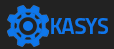
<style>
.page{position:relative;width:114px;height:49px;background:#222222}
.page>*{position:absolute;margin:0}
.t1{font:22.7px "TitilliumMaps29L-800wt";letter-spacing:-0.057em;color:#0f77eb}
</style>
<div class="page">
<p class="t1" style="left:51px;top:18px;width:57px;height:16px">KASYS</p>
</div>
